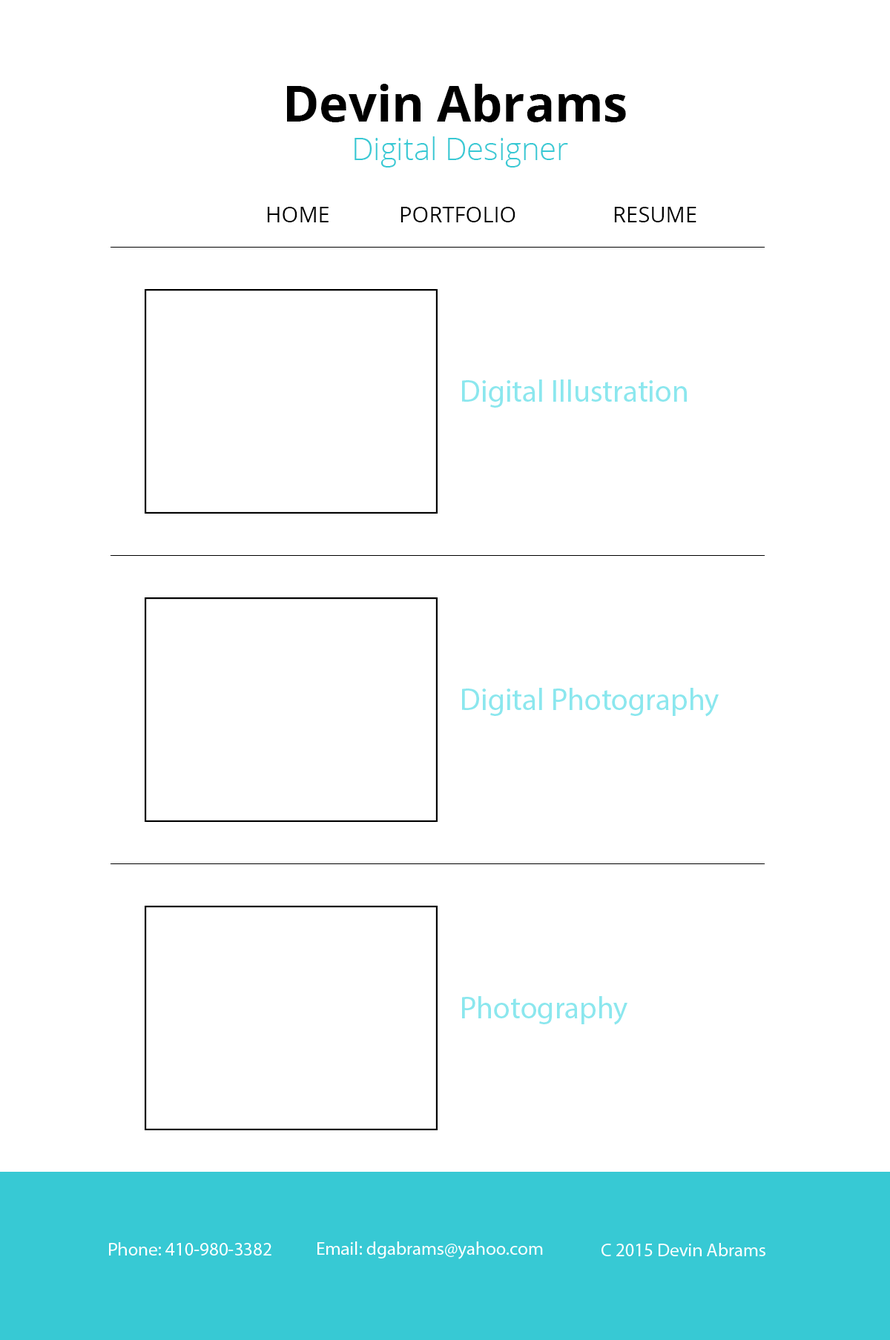
<style>
.page{position:relative;width:890px;height:1340px;background:#ffffff}
.page>*{position:absolute;margin:0}
.t1{font:49.4px "OpenSans-Bold";color:#000000}
.t2{font:30.9px "OpenSans-Light";color:#37c9d4}
.t3{font:21.6px "OpenSans";color:#000000}
.t4{font:30.9px "MyriadPro-Regular";color:#8be7ee}
</style>
<div class="page">
<p class="t1" style="left:287px;top:84px;width:339px;height:38px">Devin Abrams</p>
<p class="t2" style="left:354px;top:136px;width:214px;height:32px">Digital Designer</p>
<p class="t3" style="left:267px;top:207px;width:429px;height:15px">HOME   PORTFOLIO    RESUME</p>
<p class="t4" style="left:462px;top:380px;width:224px;height:28px">Digital Illustration</p>
<p class="t4" style="left:462px;top:688px;width:256px;height:29px">Digital Photography</p>
<p class="t4" style="left:462px;top:996px;width:165px;height:29px">Photography</p>
</div>
